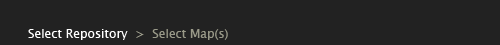
<style>
.page{position:relative;width:500px;height:45px;background:#222222}
.page>*{position:absolute;margin:0}
.t1{font:12px "LucidaGrande";color:#ffffff}
.t2{font:12px "LucidaGrande";color:#999988}
</style>
<div class="page">
<p class="t1" style="left:28px;top:29px;width:200px;height:11px">Select Repository <span class="t2"> &gt;  Select Map(s)</span></p>
</div>
